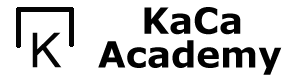
<style>
.page{position:relative;width:292px;height:80px;background:#ffffff}
.page>*{position:absolute;margin:0}
.t1{font:36px "Verdana-Bold";color:#010101}
.t2{font:48px "ArialMT";color:#040404}
</style>
<div class="page">
<p class="t1" style="left:144px;top:7px;width:97px;height:28px">KaCa</p>
<p class="t2" style="left:32px;top:32px;width:30px;height:36px">K</p>
<p class="t1" style="left:98px;top:40px;width:184px;height:35px">Academy</p>
</div>
